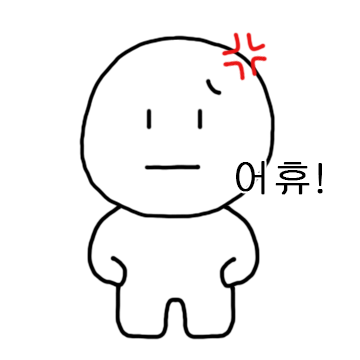
<style>
.page{position:relative;width:360px;height:360px;background:#ffffff}
.page>*{position:absolute;margin:0}
.t1{font:40px "Gulim";color:#000000;font-weight:bold}
</style>
<div class="page">
<p class="t1" style="left:236px;top:161px;width:87px;height:34px">어휴!</p>
</div>
